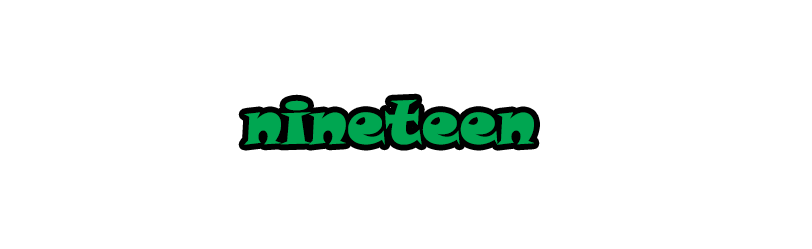
<style>
.page{position:relative;width:812px;height:249px;background:#ffffff}
.page>*{position:absolute;margin:0}
.t1{font:60px "SnapITC-Regular";color:#00a651}
</style>
<div class="page">
<p class="t1" style="left:244px;top:99px;width:290px;height:46px">nineteen</p>
</div>
